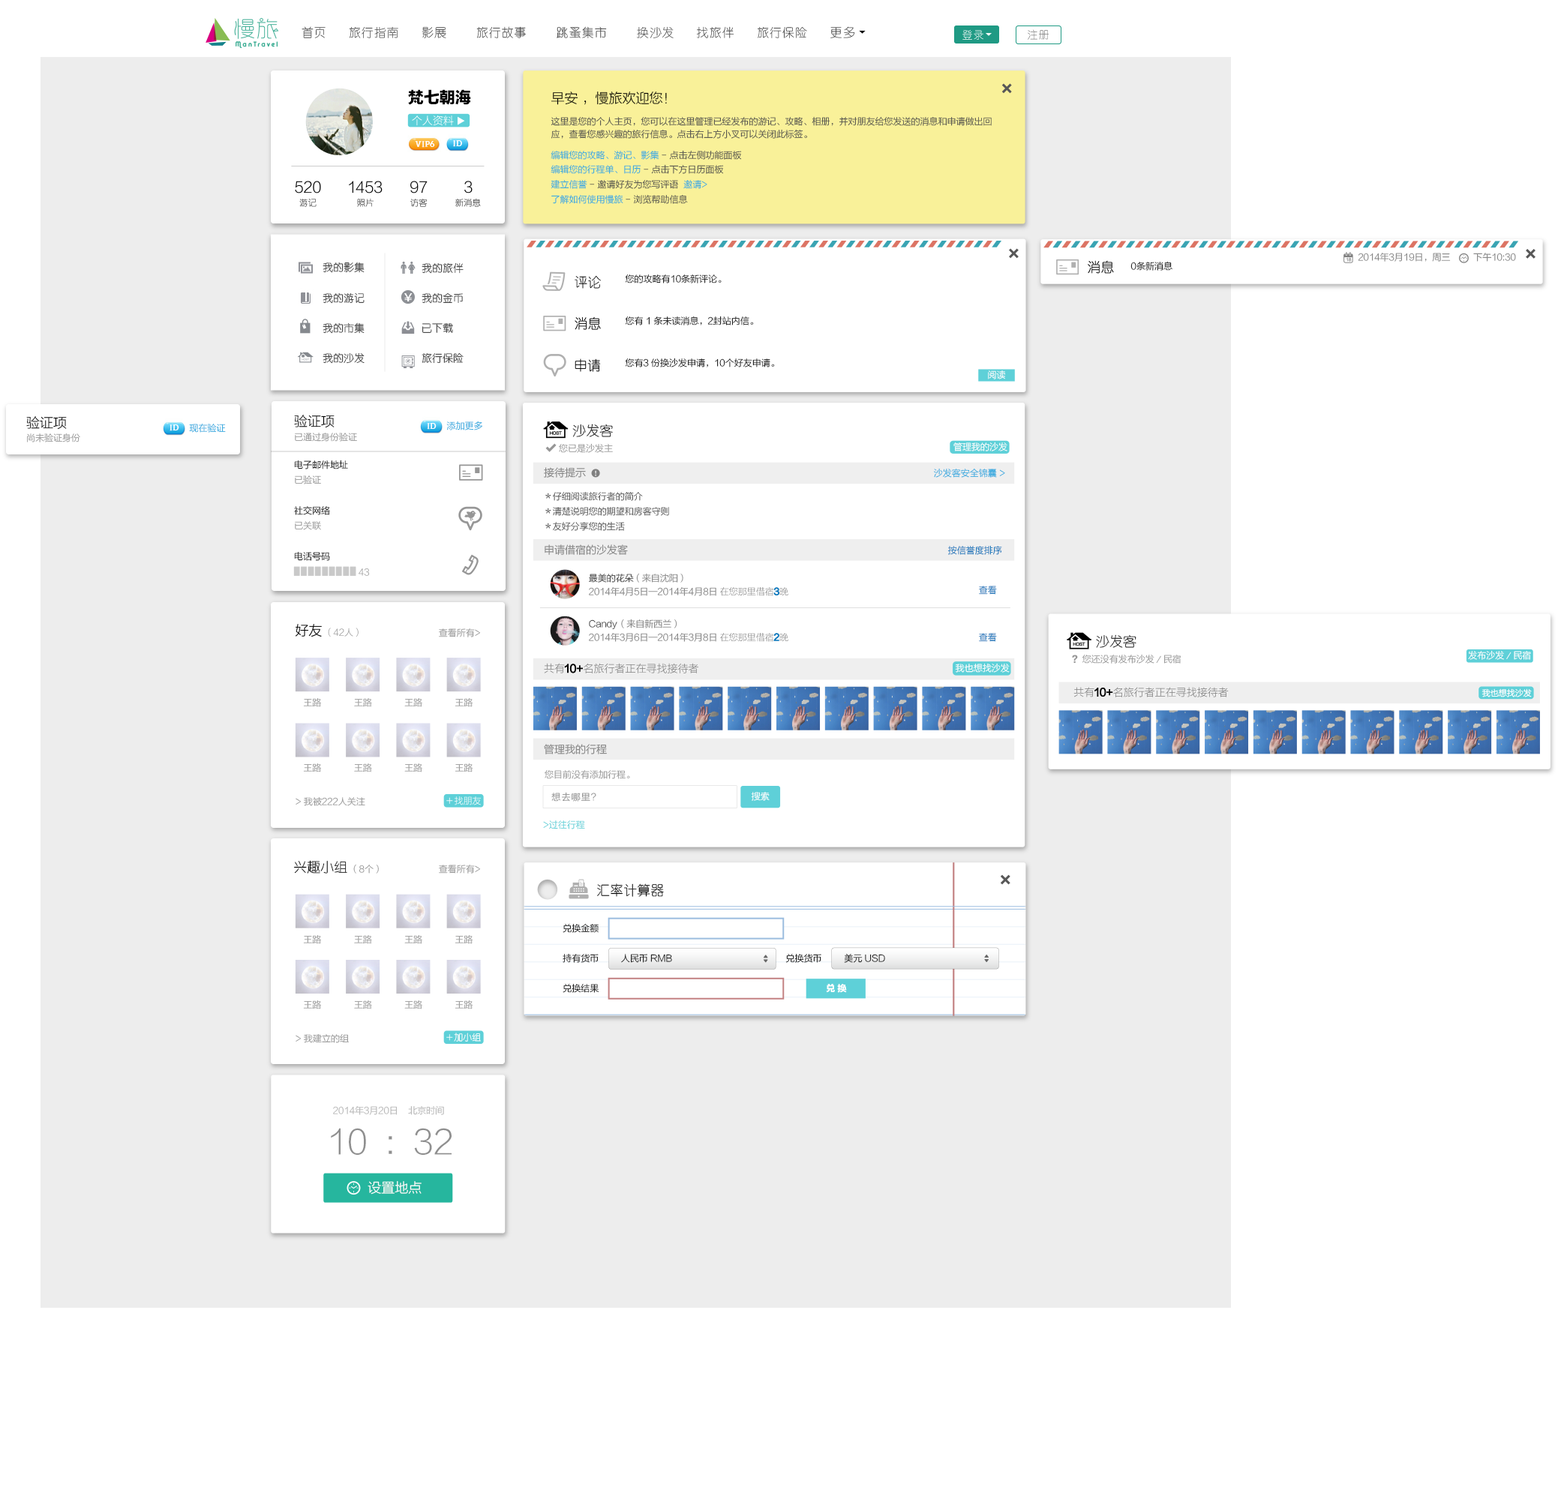
<style>
.page{position:relative;width:1558px;height:1490px;background:#ffffff}
.page>*{position:absolute;margin:0}
.t1{font:15.8px "FZLTTHK--GBK1-0";color:#000000}
.t2{font:13.5px "FZLTXHK--GBK1-0";color:#000000}
.t3{font:9px/12.3px "FZLTXHK--GBK1-0";color:#4d4d4d}
.t4{font:8.3px "JustOldFashion";color:#ffffff}
.t5{font:9px "FZLTXHK--GBK1-0"}
.t6{font:4.1px "FZLTXHK--GBK1-0";scale:1.06 1}
.t7{font:9px "FZLTXHK--GBK1-0";color:#808080}
.t8{font:10.5px "YouYuan";color:#333333}
.t9{font:13.5px "YouYuan";color:#000000}
.t10{font:10.7px "MicrosoftYaHei";color:#ffffff;scale:1.39 1}
.t11{font:10.5px "YouYuan"}
.t12{font:9px "FZLTXHK--GBK1-0";color:#ffffff}
.t13{font:9px "FZLTXHK--GBK1-0";color:#969696}
.t14{font:10.5px "FZLTXHK--GBK1-0";color:#808080}
.t15{font:9px "FZLTXHK--GBK1-0";letter-spacing:-0.22em;color:#c9c9c9}
.t16{font:9px "FZLTXHK--GBK1-0";color:#333333}
.t17{font:9px "FZLTTHK--GBK1-0";color:#969696}
.t18{font:8.2px "FZLTXHK--GBK1-0";color:#ffffff}
.t19{font:9px "FZLTXHK--GBK1-0";letter-spacing:0.1em;color:#8e8e8e}
.t20{font:9px "FZLTTHK--GBK1-0";color:#ffffff}
.t21{font:9px "YouYuan";color:#ffffff}
.t22{font:9px "FZLTXHK--GBK1-0";color:#b5b5b5}
.t23{font:33px "FZLTXHK--GBK1-0";color:#8f8f8f}
.t24{font:13.5px "FZLTXHK--GBK1-0";color:#ffffff}
</style>
<div class="page">
<p class="t1" style="left:408px;top:89px;width:63px;height:16px">梵七朝海</p>
<p class="t2" style="left:550px;top:92px;width:117px;height:13px">早安 ，慢旅欢迎您！</p>
<p class="t3" style="left:550px;top:116px;width:442px;height:23px">这里是您的个人主页，您可以在这里管理已经发布的游记、攻略、相册，并对朋友给您发送的消息和申请做出回应，查看您感兴趣的旅行信息。点击右上方小叉可以关闭此标签。</p>
<p class="t4" style="left:415px;top:141px;width:20px;height:7px">VIP6</p>
<p class="t4" style="left:453px;top:140px;width:9px;height:7px">ID</p>
<p class="t5" style="left:550px;top:150px;width:192px;height:10px">编辑您的攻略、游记、影集 - 点击左侧功能面板</p>
<p class="t5" style="left:550px;top:164px;width:174px;height:10px">编辑您的行程单、日历 - 点击下方日历面板</p>
<p class="t5" style="left:550px;top:179px;width:157px;height:10px">建立信誉 - 邀请好友为您写评语  邀请&gt;</p>
<p class="t5" style="left:551px;top:194px;width:137px;height:10px">了解如何使用慢旅 - 浏览帮助信息</p>
<p class="t6" style="left:1346px;top:257px;width:6px;height:5px">18</p>
<p class="t7" style="left:1358px;top:253px;width:92px;height:9px">2014年3月19日，周三</p>
<p class="t7" style="left:1473px;top:253px;width:43px;height:9px">下午10:30</p>
<p class="t8" style="left:322px;top:262px;width:42px;height:11px">我的影集</p>
<p class="t8" style="left:422px;top:262px;width:42px;height:12px">我的旅伴</p>
<p class="t5" style="left:1130px;top:261px;width:42px;height:10px">0条新消息</p>
<p class="t9" style="left:574px;top:275px;width:27px;height:14px">评论</p>
<p class="t5" style="left:625px;top:274px;width:97px;height:10px">您的攻略有10条新评论。</p>
<p class="t8" style="left:322px;top:292px;width:42px;height:12px">我的游记</p>
<p class="t10" style="left:404px;top:293px;width:8px;height:9px">¥</p>
<p class="t8" style="left:422px;top:292px;width:41px;height:12px">我的金币</p>
<p class="t5" style="left:625px;top:316px;width:129px;height:10px">您有 1 条未读消息，2封站内信。</p>
<p class="t8" style="left:322px;top:322px;width:42px;height:12px">我的市集</p>
<p class="t8" style="left:422px;top:322px;width:31px;height:11px">已下载</p>
<p class="t11" style="left:322px;top:352px;width:42px;height:12px">我的沙发</p>
<p class="t8" style="left:422px;top:352px;width:42px;height:12px">旅行保险</p>
<p class="t5" style="left:625px;top:358px;width:150px;height:10px">您有3 份换沙发申请，10个好友申请。</p>
<p class="t12" style="left:988px;top:370px;width:17px;height:10px">阅读</p>
<p class="t2" style="left:26px;top:416px;width:41px;height:14px">验证项</p>
<p class="t4" style="left:170px;top:424px;width:9px;height:7px">ID</p>
<p class="t5" style="left:189px;top:423px;width:37px;height:10px">现在验证</p>
<p class="t2" style="left:294px;top:415px;width:40px;height:13px">验证项</p>
<p class="t4" style="left:427px;top:423px;width:9px;height:7px">ID</p>
<p class="t5" style="left:446px;top:421px;width:36px;height:9px">添加更多</p>
<p class="t9" style="left:572px;top:424px;width:41px;height:13px">沙发客</p>
<p class="t13" style="left:27px;top:434px;width:53px;height:8px">尚未验证身份</p>
<p class="t13" style="left:295px;top:433px;width:62px;height:9px">已通过身份验证</p>
<p class="t13" style="left:559px;top:443px;width:54px;height:10px">您已是沙发主</p>
<p class="t12" style="left:953px;top:442px;width:54px;height:10px">管理我的沙发</p>
<p class="t5" style="left:294px;top:460px;width:54px;height:10px">电子邮件地址</p>
<p class="t14" style="left:544px;top:467px;width:42px;height:11px">接待提示</p>
<p class="t5" style="left:934px;top:468px;width:71px;height:10px">沙发客安全锦囊 &gt;</p>
<p class="t13" style="left:295px;top:476px;width:26px;height:8px">已验证</p>
<p class="t5" style="left:545px;top:491px;width:98px;height:10px">＊仔细阅读旅行者的简介</p>
<p class="t5" style="left:294px;top:506px;width:36px;height:9px">社交网络</p>
<p class="t5" style="left:545px;top:507px;width:124px;height:9px">＊清楚说明您的期望和房客守则</p>
<p class="t13" style="left:295px;top:521px;width:26px;height:9px">已关联</p>
<p class="t5" style="left:545px;top:521px;width:80px;height:10px">＊友好分享您的生活</p>
<p class="t14" style="left:544px;top:544px;width:84px;height:11px">申请借宿的沙发客</p>
<p class="t5" style="left:947px;top:545px;width:55px;height:10px">按信誉度排序</p>
<p class="t5" style="left:294px;top:551px;width:36px;height:10px">电话号码</p>
<p class="t15" style="left:293px;top:566px;width:63px;height:10px">▋▋▋▋▋▋▋▋▋</p>
<p class="t16" style="left:589px;top:574px;width:45px;height:9px">最美的花朵</p>
<p class="t7" style="left:636px;top:573px;width:47px;height:10px">（来自沈阳）</p>
<p class="t7" style="left:589px;top:587px;width:127px;height:9px">2014年4月5日—2014年4月8日</p>
<p class="t5" style="left:979px;top:586px;width:18px;height:9px">查看</p>
<p class="t13" style="left:439px;top:628px;width:41px;height:10px">查看所有&gt;</p>
<p class="t16" style="left:589px;top:620px;width:28px;height:9px">Candy</p>
<p class="t7" style="left:621px;top:619px;width:56px;height:9px">（来自新西兰）</p>
<p class="t7" style="left:589px;top:633px;width:127px;height:9px">2014年3月6日—2014年3月8日</p>
<p class="t5" style="left:979px;top:633px;width:18px;height:9px">查看</p>
<p class="t9" style="left:1096px;top:634px;width:40px;height:14px">沙发客</p>
<p class="t13" style="left:1082px;top:654px;width:98px;height:10px">您还没有发布沙发／民宿</p>
<p class="t12" style="left:1468px;top:650px;width:63px;height:10px">发布沙发／民宿</p>
<p class="t12" style="left:955px;top:663px;width:55px;height:10px">我也想找沙发</p>
<p class="t17" style="left:1072px;top:655px;width:6px;height:8px">？</p>
<p class="t18" style="left:1481px;top:688px;width:51px;height:10px">我也想找沙发</p>
<p class="t13" style="left:303px;top:698px;width:18px;height:9px">王路</p>
<p class="t13" style="left:354px;top:698px;width:18px;height:9px">王路</p>
<p class="t13" style="left:404px;top:698px;width:18px;height:9px">王路</p>
<p class="t13" style="left:454px;top:698px;width:18px;height:9px">王路</p>
<p class="t14" style="left:544px;top:744px;width:63px;height:10px">管理我的行程</p>
<p class="t13" style="left:303px;top:764px;width:18px;height:8px">王路</p>
<p class="t13" style="left:354px;top:764px;width:18px;height:8px">王路</p>
<p class="t13" style="left:404px;top:764px;width:18px;height:8px">王路</p>
<p class="t13" style="left:454px;top:764px;width:18px;height:8px">王路</p>
<p class="t13" style="left:544px;top:770px;width:86px;height:9px">您目前没有添加行程。</p>
<p class="t13" style="left:296px;top:797px;width:69px;height:9px">&gt; 我被222人关注</p>
<p class="t19" style="left:551px;top:792px;width:45px;height:10px">想去哪里？</p>
<p class="t12" style="left:751px;top:792px;width:19px;height:9px">搜索</p>
<p class="t5" style="left:543px;top:820px;width:42px;height:10px">&gt;过往行程</p>
<p class="t9" style="left:293px;top:860px;width:54px;height:14px">兴趣小组</p>
<p class="t13" style="left:353px;top:864px;width:26px;height:10px">（8个）</p>
<p class="t13" style="left:439px;top:865px;width:41px;height:9px">查看所有&gt;</p>
<p class="t9" style="left:597px;top:884px;width:67px;height:13px">汇率计算器</p>
<p class="t5" style="left:562px;top:924px;width:36px;height:9px">兑换金额</p>
<p class="t13" style="left:303px;top:935px;width:18px;height:9px">王路</p>
<p class="t13" style="left:354px;top:935px;width:18px;height:9px">王路</p>
<p class="t13" style="left:404px;top:935px;width:18px;height:9px">王路</p>
<p class="t13" style="left:454px;top:935px;width:18px;height:9px">王路</p>
<p class="t5" style="left:562px;top:953px;width:36px;height:10px">持有货币</p>
<p class="t5" style="left:621px;top:954px;width:51px;height:9px">人民币 RMB</p>
<p class="t5" style="left:785px;top:954px;width:36px;height:9px">兑换货币</p>
<p class="t5" style="left:844px;top:954px;width:41px;height:9px">美元 USD</p>
<p class="t5" style="left:562px;top:984px;width:37px;height:9px">兑换结果</p>
<p class="t20" style="left:826px;top:984px;width:21px;height:9px">兑 换</p>
<p class="t13" style="left:303px;top:1000px;width:18px;height:10px">王路</p>
<p class="t13" style="left:354px;top:1000px;width:18px;height:10px">王路</p>
<p class="t13" style="left:404px;top:1000px;width:18px;height:10px">王路</p>
<p class="t13" style="left:454px;top:1000px;width:18px;height:10px">王路</p>
<p class="t13" style="left:296px;top:1034px;width:53px;height:9px">&gt; 我建立的组</p>
<p class="t21" style="left:454px;top:1033px;width:27px;height:9px">加小组</p>
<p class="t22" style="left:333px;top:1106px;width:111px;height:9px">2014年3月20日    北京时间</p>
<p class="t23" style="left:331px;top:1128px;width:121px;height:27px">10  :  32</p>
<p class="t24" style="left:368px;top:1181px;width:54px;height:14px">设置地点</p>
</div>
